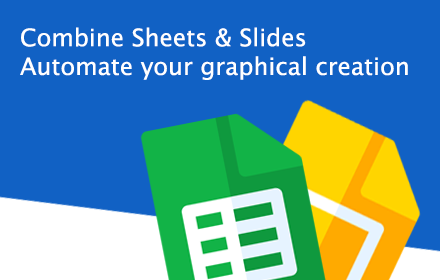
<style>
.page{position:relative;width:440px;height:280px;background:#1161c4}
.page>*{position:absolute;margin:0}
.t1{font:24px "LucidaGrande";color:#ffffff}
</style>
<div class="page">
<p class="t1" style="left:20px;top:27px;width:388px;height:53px">Combine Sheets &amp; Slides<br>Automate your graphical creation</p>
</div>
